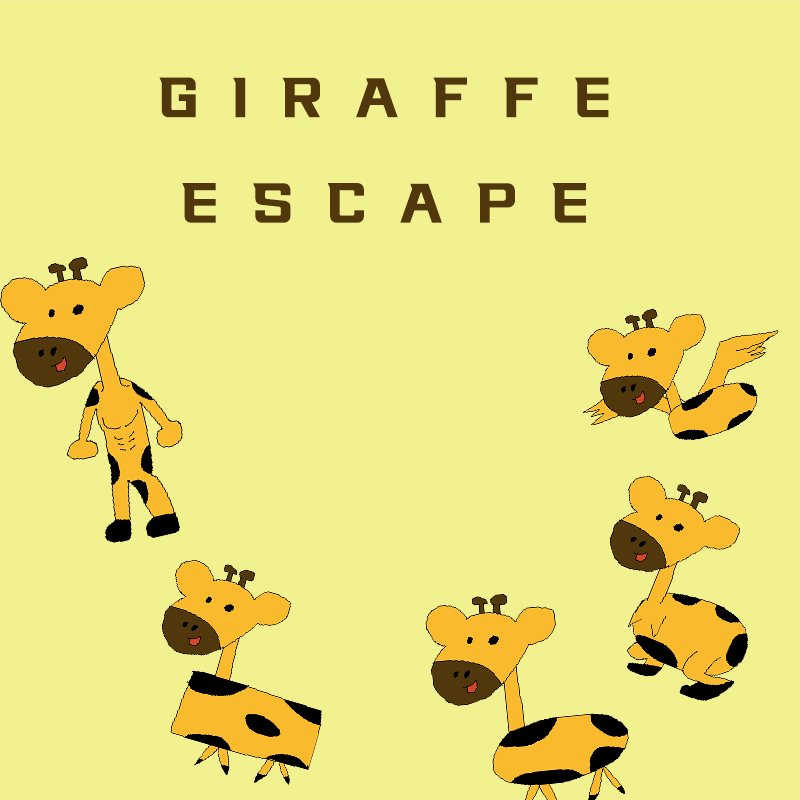
<style>
.page{position:relative;width:800px;height:800px;background:#f2f18f}
.page>*{position:absolute;margin:0}
.t1{font:88px "sdprototype-Regular";letter-spacing:0.36em;color:#50370c}
</style>
<div class="page">
<p class="t1" style="left:159px;top:77px;width:450px;height:146px;text-align:center">GIRAFFE<br>ESCAPE</p>
</div>
